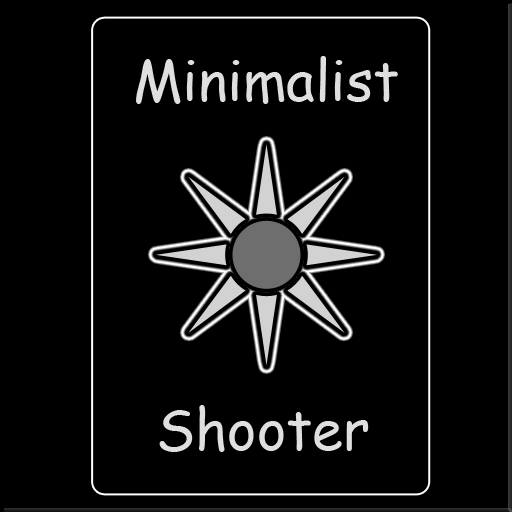
<style>
.page{position:relative;width:512px;height:512px;background:#000000}
.page>*{position:absolute;margin:0}
.t1{font:55.9px "ComicSansMS";color:#dfdfdf}
</style>
<div class="page">
<p class="t1" style="left:136px;top:56px;width:262px;height:48px">Minimalist</p>
<p class="t1" style="left:159px;top:405px;width:210px;height:47px">Shooter</p>
</div>
